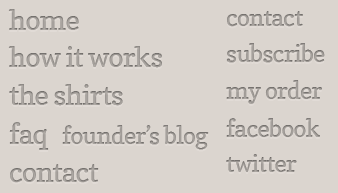
<style>
.page{position:relative;width:338px;height:193px;background:#dbd5cf}
.page>*{position:absolute;margin:0}
.t1{font:28px "Copse";letter-spacing:-0.025em;color:#a09b97}
.t2{font:24px "Copse";letter-spacing:-0.025em;color:#9d9894}
.t3{font:28px "Copse";letter-spacing:-0.025em;color:#9f9b96}
.t4{font:24px "Copse";letter-spacing:-0.025em;color:#9d9994}
</style>
<div class="page">
<p class="t1" style="left:8px;top:9px;width:71px;height:21px">home</p>
<p class="t2" style="left:227px;top:11px;width:76px;height:16px">contact</p>
<p class="t1" style="left:8px;top:46px;width:154px;height:22px">how it works</p>
<p class="t2" style="left:226px;top:43px;width:99px;height:20px">subscribe</p>
<p class="t3" style="left:9px;top:84px;width:114px;height:22px">the shirts</p>
<p class="t2" style="left:226px;top:80px;width:96px;height:24px">my order</p>
<p class="t1" style="left:9px;top:122px;width:40px;height:28px">faq</p>
<p class="t4" style="left:62px;top:125px;width:147px;height:25px">founder’s blog</p>
<p class="t2" style="left:226px;top:118px;width:94px;height:20px">facebook</p>
<p class="t2" style="left:226px;top:154px;width:71px;height:18px">twitter</p>
<p class="t1" style="left:10px;top:164px;width:89px;height:19px">contact</p>
</div>
